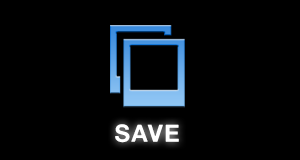
<style>
.page{position:relative;width:300px;height:160px;background:#000000}
.page>*{position:absolute;margin:0}
.t1{font:24px "AlteHaasGrotesk_Bold";letter-spacing:0.05em;color:#ffffff}
</style>
<div class="page">
<p class="t1" style="left:115px;top:124px;width:64px;height:19px">SAVE</p>
</div>
